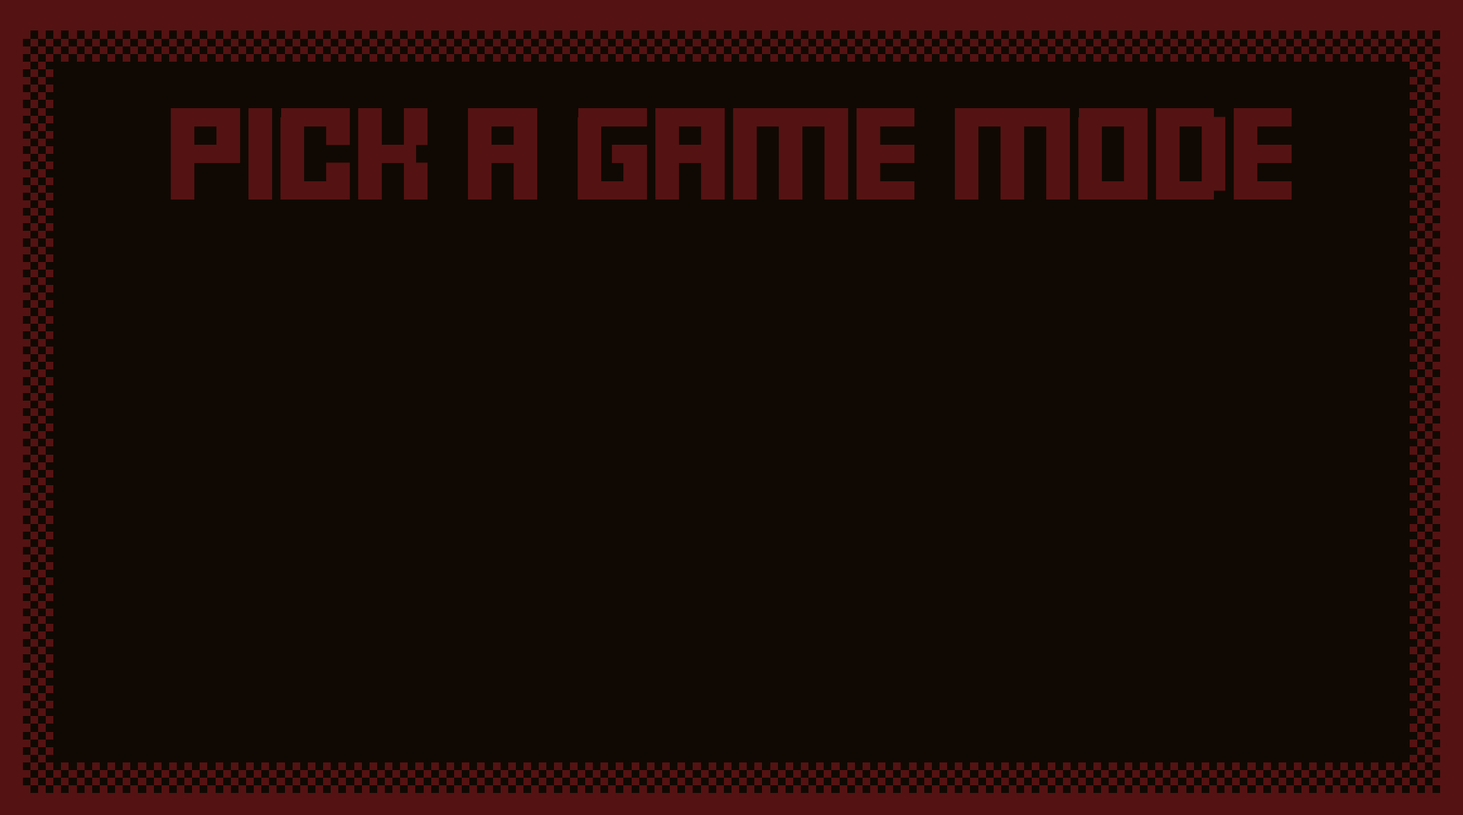
<style>
.page{position:relative;width:1463px;height:815px;background:#100903}
.page>*{position:absolute;margin:0}
.t1{font:73.1px "FFFForward";letter-spacing:-0.025em;color:#551212;scale:1.25 1}
</style>
<div class="page">
<p class="t1" style="left:171px;top:108px;width:1121px;height:92px">PICK A GAME MODE</p>
</div>
